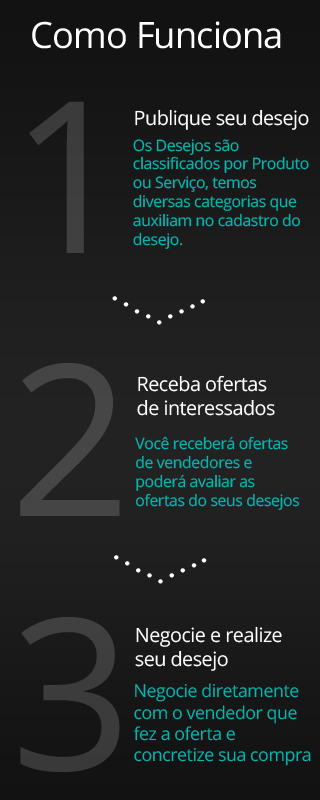
<style>
.page{position:relative;width:320px;height:800px}
.page>*{position:absolute;margin:0}
.t1{font:36.4px "OpenSans";letter-spacing:-0.025em;color:#ffffff}
.t2{font:211.3px "OpenSans";letter-spacing:-0.025em;color:#3d3d3d}
.t3{font:19.7px "OpenSans";letter-spacing:-0.025em;color:#ffffff}
.t4{font:15.8px "OpenSans";letter-spacing:-0.025em;color:#04b4ae}
.t5{font:36.4px "CenturyGothic";letter-spacing:-0.025em;color:#ffffff}
.t6{font:211.3px "OpenSans";letter-spacing:-0.025em;color:#454545}
.t7{font:211.3px "OpenSans";letter-spacing:-0.025em;color:#3c3c3c}
.t8{font:17.8px "OpenSans";letter-spacing:-0.025em;color:#04b4ae}
</style>
<div class="page">
<p class="t1" style="left:32px;top:21px;width:249px;height:28px">Como Funciona</p>
<p class="t2" style="left:29px;top:101px;width:55px;height:152px">1</p>
<p class="t3" style="left:135px;top:109px;width:174px;height:21px">Publique seu desejo</p>
<p class="t4" style="left:133px;top:139px;width:176px;height:110px">Os Desejos são classificados por Produto ou Serviço, temos diversas categorias que auxiliam no cadastro do desejo.</p>
<p class="t5" style="left:112px;top:296px;width:5px;height:5px;rotate:90deg">.</p>
<p class="t5" style="left:123px;top:302px;width:6px;height:5px;rotate:90deg">.</p>
<p class="t5" style="left:190px;top:304px;width:5px;height:5px;rotate:90deg">.</p>
<p class="t5" style="left:200px;top:299px;width:5px;height:5px;rotate:90deg">.</p>
<p class="t5" style="left:134px;top:309px;width:6px;height:5px;rotate:90deg">.</p>
<p class="t5" style="left:146px;top:314px;width:5px;height:5px;rotate:90deg">.</p>
<p class="t5" style="left:168px;top:314px;width:5px;height:5px;rotate:90deg">.</p>
<p class="t5" style="left:179px;top:309px;width:5px;height:5px;rotate:90deg">.</p>
<p class="t5" style="left:157px;top:320px;width:5px;height:5px;rotate:90deg">.</p>
<p class="t6" style="left:20px;top:362px;width:100px;height:154px">2</p>
<p class="t3" style="left:137px;top:375px;width:138px;height:41px">Receba ofertas <br>de interessados</p>
<p class="t4" style="left:135px;top:436px;width:165px;height:74px">Você receberá ofertas de vendedores e poderá avaliar as ofertas do seus desejos</p>
<p class="t5" style="left:114px;top:555px;width:5px;height:5px;rotate:90deg">.</p>
<p class="t5" style="left:201px;top:558px;width:6px;height:5px;rotate:90deg">.</p>
<p class="t5" style="left:125px;top:561px;width:5px;height:5px;rotate:90deg">.</p>
<p class="t5" style="left:136px;top:568px;width:5px;height:5px;rotate:90deg">.</p>
<p class="t5" style="left:180px;top:568px;width:5px;height:5px;rotate:90deg">.</p>
<p class="t5" style="left:191px;top:563px;width:6px;height:5px;rotate:90deg">.</p>
<p class="t5" style="left:147px;top:573px;width:5px;height:5px;rotate:90deg">.</p>
<p class="t5" style="left:158px;top:579px;width:5px;height:5px;rotate:90deg">.</p>
<p class="t5" style="left:169px;top:573px;width:5px;height:5px;rotate:90deg">.</p>
<p class="t7" style="left:20px;top:616px;width:100px;height:156px">3</p>
<p class="t3" style="left:135px;top:626px;width:147px;height:45px">Negocie e realize<br>seu desejo</p>
<p class="t8" style="left:133px;top:683px;width:178px;height:83px">Negocie diretamente com o vendedor que fez a oferta e concretize sua compra</p>
</div>
